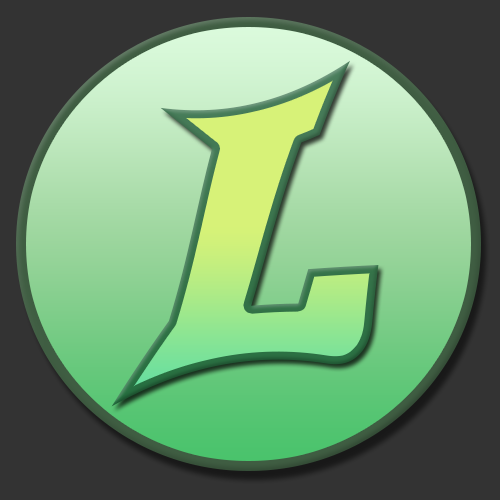
<style>
.page{position:relative;width:500px;height:500px;background:#333333}
.page>*{position:absolute;margin:0}
.t1{font:467.6px "Demonized";letter-spacing:0.055em;text-transform:uppercase;scale:0.95 1}
</style>
<div class="page">
<p class="t1" style="left:111px;top:60px;width:268px;height:347px;rotate:-6deg">L</p>
</div>
